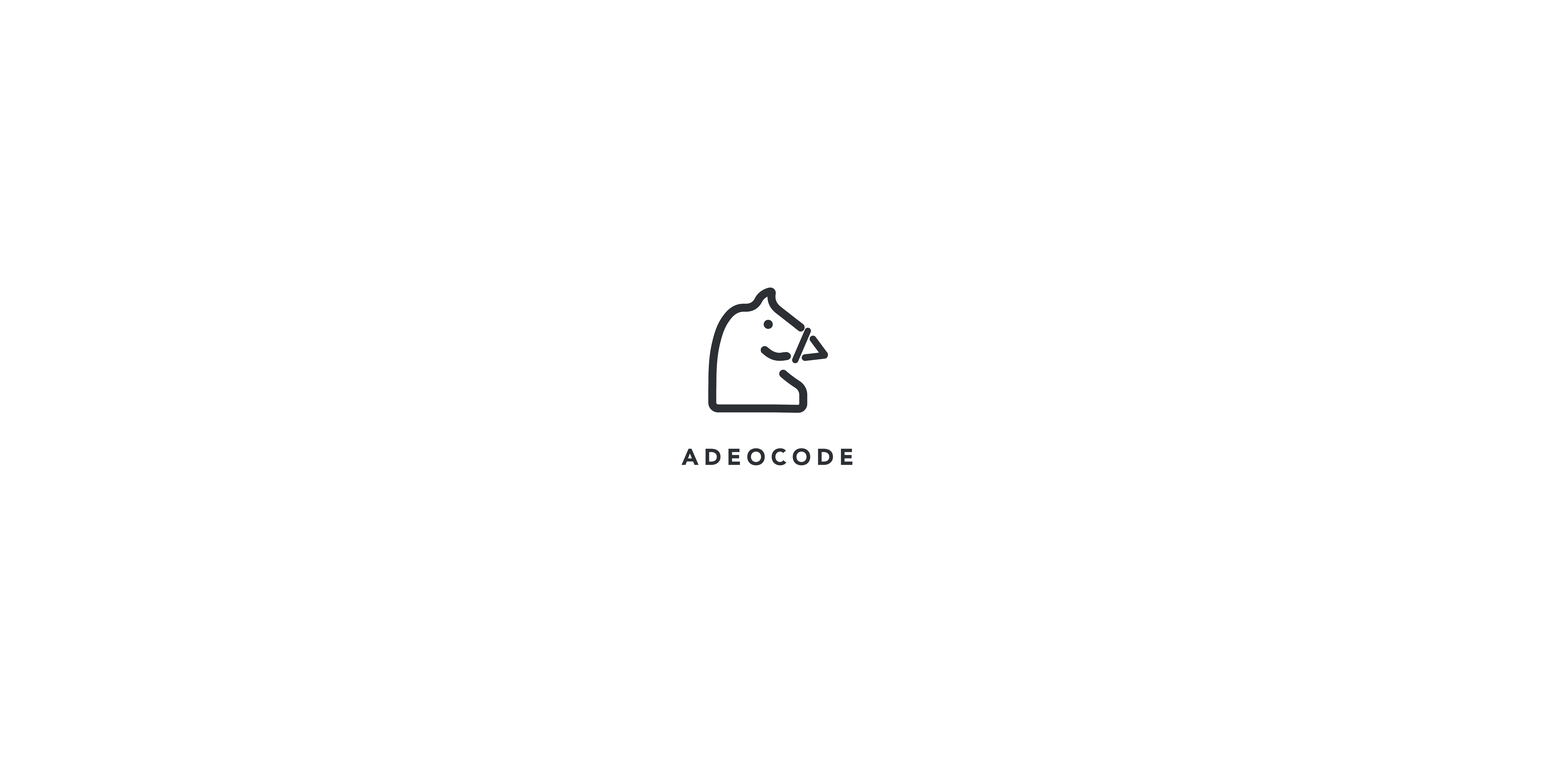
<style>
.page{position:relative;width:1544px;height:772px;background:#ffffff}
.page>*{position:absolute;margin:0}
.t1{font:22.8px "Avenir-Black";letter-spacing:0.24em;color:#2c2f33}
</style>
<div class="page">
<p class="t1" style="left:682px;top:448px;width:171px;height:17px">ADEOCODE</p>
</div>
